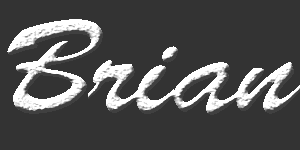
<style>
.page{position:relative;width:300px;height:150px;background:#333333}
.page>*{position:absolute;margin:0}
.t1{font:135.1px "BrushScriptStd"}
</style>
<div class="page">
<p class="t1" style="left:7px;top:19px;width:293px;height:96px">Brian</p>
</div>
